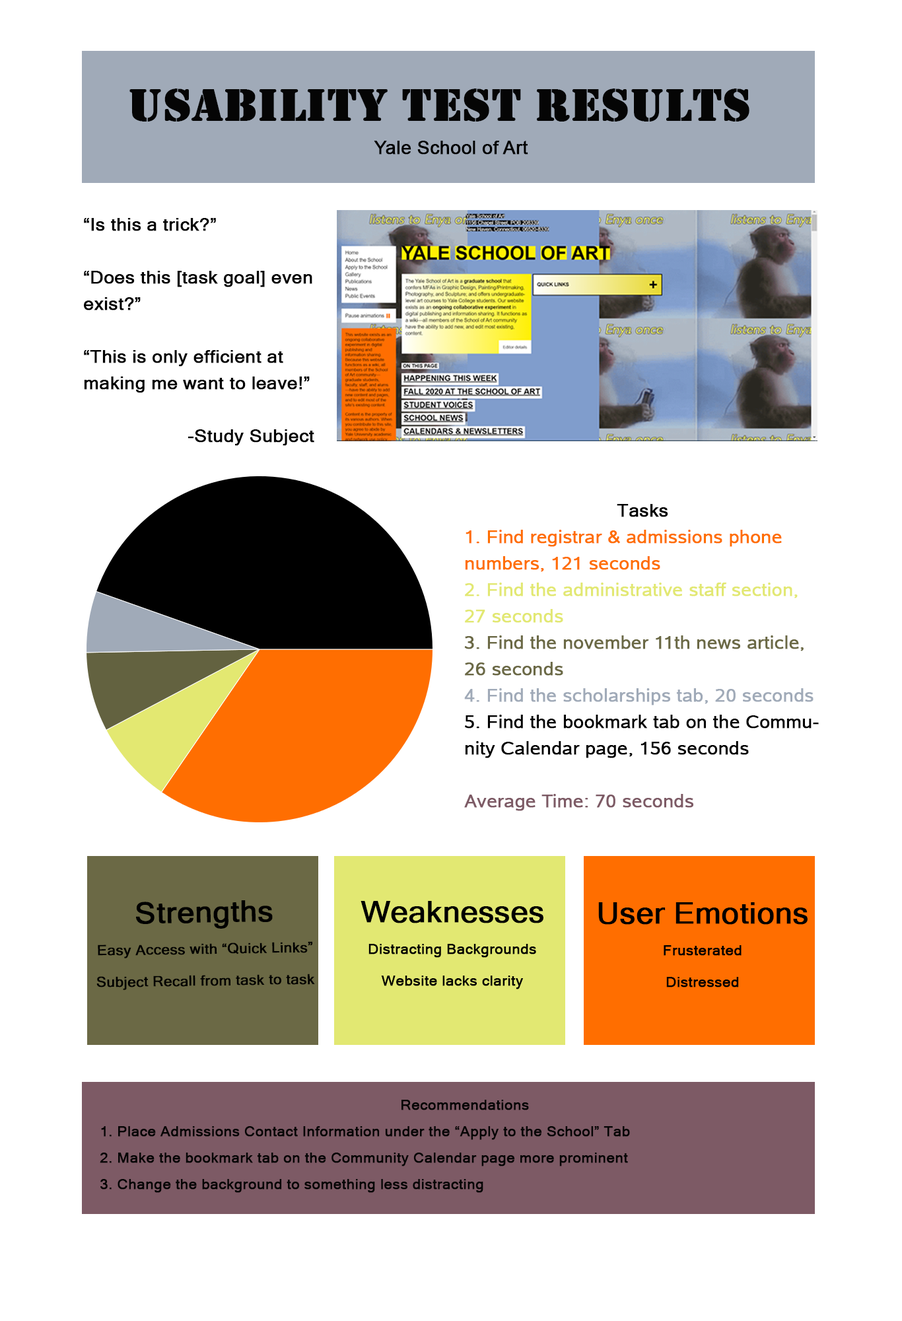
<style>
.page{position:relative;width:902px;height:1321px;background:#ffffff}
.page>*{position:absolute;margin:0}
.t1{font:47px "Stencil";color:#050505;font-weight:bold;scale:1.04 1}
.t2{font:17.6px "ArialMT";color:#000000;font-weight:bold;scale:1.04 1}
.t3{font:17.6px/26.4px "MicrosoftSansSerif";color:#000000;font-weight:bold;scale:1.04 1}
.t4{font:17.6px/26.4px "AlbanyAMT";color:#000000;font-weight:bold;scale:1.04 1}
.t5{font:17.6px/26.4px "AlbanyAMT";color:#ff6e00;font-weight:bold;scale:1.04 1}
.t6{font:17.6px/26.4px "AlbanyAMT";color:#e2e872;font-weight:bold;scale:1.04 1}
.t7{font:17.6px/26.4px "AlbanyAMT";color:#6b6945;font-weight:bold;scale:1.04 1}
.t8{font:17.6px/26.4px "AlbanyAMT";color:#a0aab8;font-weight:bold;scale:1.04 1}
.t9{font:17.6px/26.4px "AlbanyAMT";color:#7d5a65;font-weight:bold;scale:1.04 1}
.t10{font:14.1px/31.7px "MicrosoftSansSerif";color:#000000;font-weight:bold;scale:1.04 1}
.t11{font:29.4px/31.7px "MicrosoftSansSerif";color:#000000;font-weight:bold;scale:1.04 1}
.t12{font:29.4px/26.4px "MicrosoftSansSerif";color:#000000;font-weight:bold;scale:1.04 1}
.t13{font:14.1px/26.4px "MicrosoftSansSerif";color:#050505;font-weight:bold;scale:1.04 1}
</style>
<div class="page">
<p class="t1" style="left:129px;top:89px;width:621px;height:33px">USABILITY TEST RESULTS</p>
<p class="t2" style="left:374px;top:141px;width:155px;height:14px">Yale School of Art</p>
<p class="t3" style="left:84px;top:218px;width:230px;height:228px">“Is this a trick?”<br><br>“Does this [task goal] even exist?”<br><br>“This is only efficient at making me want to leave!”<br><br>-Study Subject</p>
<p class="t4" style="left:464px;top:504px;width:355px;height:307px;text-align:center"><span class="t3">Tasks<br></span><span class="t5">1. Find registrar &amp; admissions phone numbers, 121 seconds<br></span><span class="t6">2. Find the administrative staff section, 27 seconds<br></span><span class="t7">3. Find the november 11th news article, 26 seconds<br></span><span class="t8">4. Find the scholarships tab, 20 seconds<br></span>5. Find the bookmark tab on the Community Calendar page, 156 seconds<br><br><span class="t9">Average Time: 70 seconds</span></p>
<p class="t10" style="left:96px;top:900px;width:219px;height:90px;text-align:center;rotate:-1deg"><span class="t11">Strengths<br></span>Easy Access with “Quick Links”<br>Subject Recall from task to task</p>
<p class="t10" style="left:361px;top:901px;width:183px;height:89px;text-align:center"><span class="t12"><br></span><span class="t11">Weaknesses <br></span>Distracting Backgrounds<br>Website lacks clarity</p>
<p class="t10" style="left:599px;top:902px;width:209px;height:86px;text-align:center"><span class="t11">User Emotions<br></span>Frusterated<br>Distressed</p>
<p class="t13" style="left:100px;top:1100px;width:530px;height:93px;text-align:center">Recommendations<br>1. Place Admissions Contact Information under the “Apply to the School” Tab<br>2. Make the bookmark tab on the Community Calendar page more prominent<br>3. Change the background to something less distracting</p>
</div>
